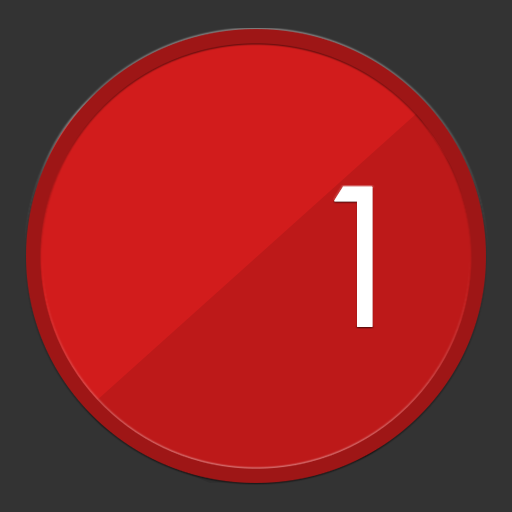
<style>
.page{position:relative;width:512px;height:512px;background:#333333}
.page>*{position:absolute;margin:0}
.t1{font:193.9px "CenturyGothic";letter-spacing:0.04em;color:#ffffff;font-weight:bold;scale:1.04 1}
</style>
<div class="page">
<p class="t1" style="left:334px;top:186px;width:39px;height:141px">1</p>
</div>
